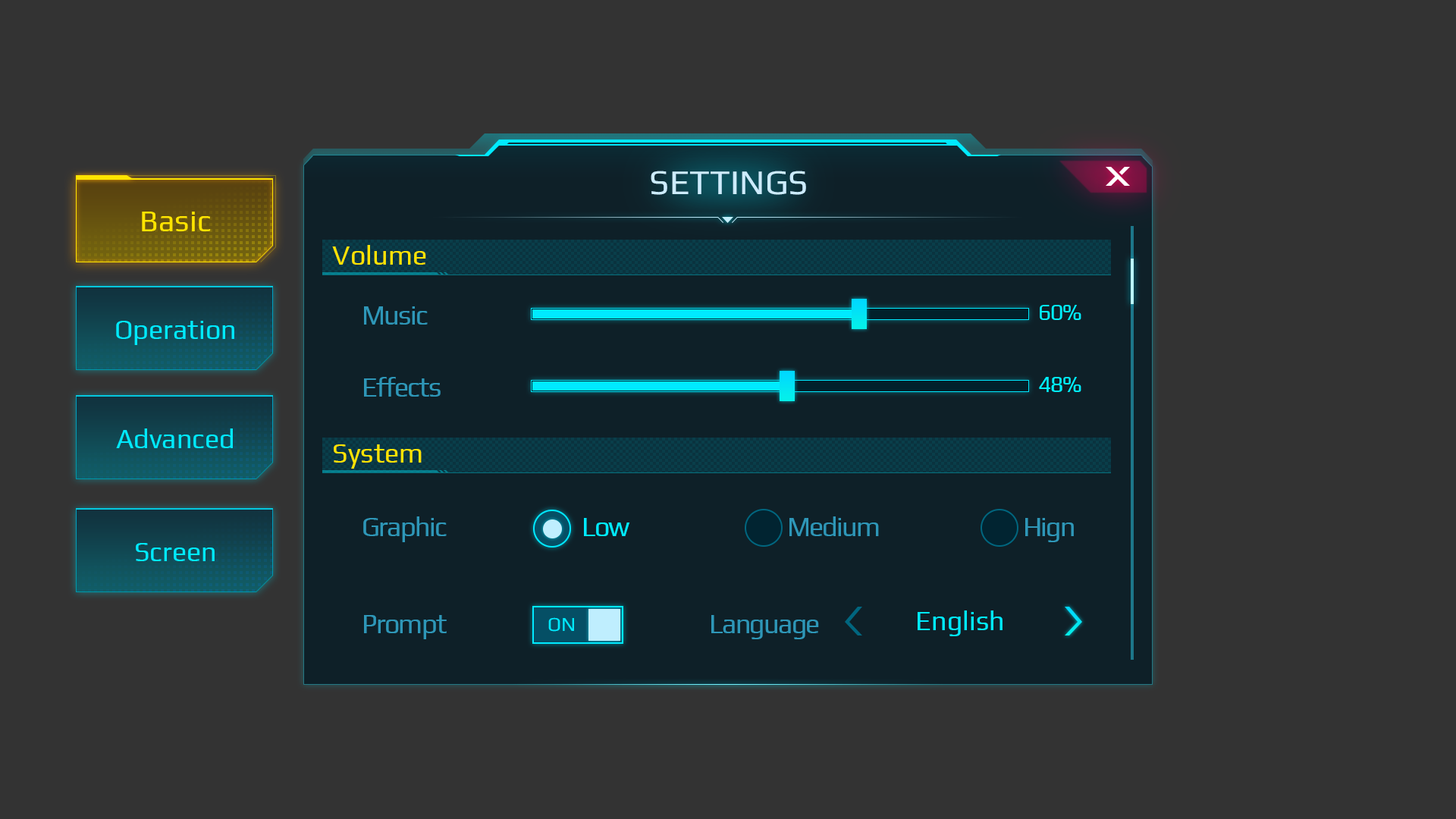
<style>
.page{position:relative;width:1456px;height:819px;background:#333333}
.page>*{position:absolute;margin:0}
.t1{font:34.9px "Play-Regular";color:#ccecfe}
.t2{font:30.3px "Play-Regular";color:#ffe400}
.t3{font:27.3px "Play-Regular";color:#ffe400}
.t4{font:22.7px "Play-Regular";letter-spacing:-0.05em;color:#00f0ff}
.t5{font:27.3px "Play-Regular";letter-spacing:-0.05em;color:#2e97b8}
.t6{font:27.3px "Play-Regular";color:#00eaff}
.t7{font:27.3px "Play-Regular";letter-spacing:-0.05em;color:#00eaff}
.t8{font:19.7px "Play-Regular";color:#00eaff}
</style>
<div class="page">
<p class="t1" style="left:651px;top:171px;width:155px;height:24px">SETTINGS</p>
<p class="t2" style="left:142px;top:212px;width:69px;height:19px">Basic</p>
<p class="t3" style="left:332px;top:245px;width:94px;height:20px">Volume</p>
<p class="t4" style="left:1040px;top:305px;width:41px;height:15px">60%</p>
<p class="t5" style="left:364px;top:306px;width:64px;height:19px">Music</p>
<p class="t6" style="left:116px;top:321px;width:118px;height:24px">Operation</p>
<p class="t5" style="left:364px;top:377px;width:77px;height:20px">Effects</p>
<p class="t4" style="left:1039px;top:377px;width:42px;height:15px">48%</p>
<p class="t6" style="left:116px;top:428px;width:117px;height:20px">Advanced</p>
<p class="t3" style="left:334px;top:444px;width:88px;height:25px">System</p>
<p class="t5" style="left:363px;top:516px;width:84px;height:26px">Graphic</p>
<p class="t7" style="left:584px;top:518px;width:46px;height:18px">Low</p>
<p class="t5" style="left:789px;top:516px;width:90px;height:20px">Medium</p>
<p class="t5" style="left:1025px;top:518px;width:49px;height:24px">Hign</p>
<p class="t6" style="left:136px;top:543px;width:79px;height:18px">Screen</p>
<p class="t5" style="left:364px;top:615px;width:83px;height:24px">Prompt</p>
<p class="t8" style="left:548px;top:617px;width:26px;height:15px">ON</p>
<p class="t5" style="left:711px;top:615px;width:108px;height:24px">Language</p>
<p class="t6" style="left:918px;top:610px;width:85px;height:26px">English</p>
</div>
